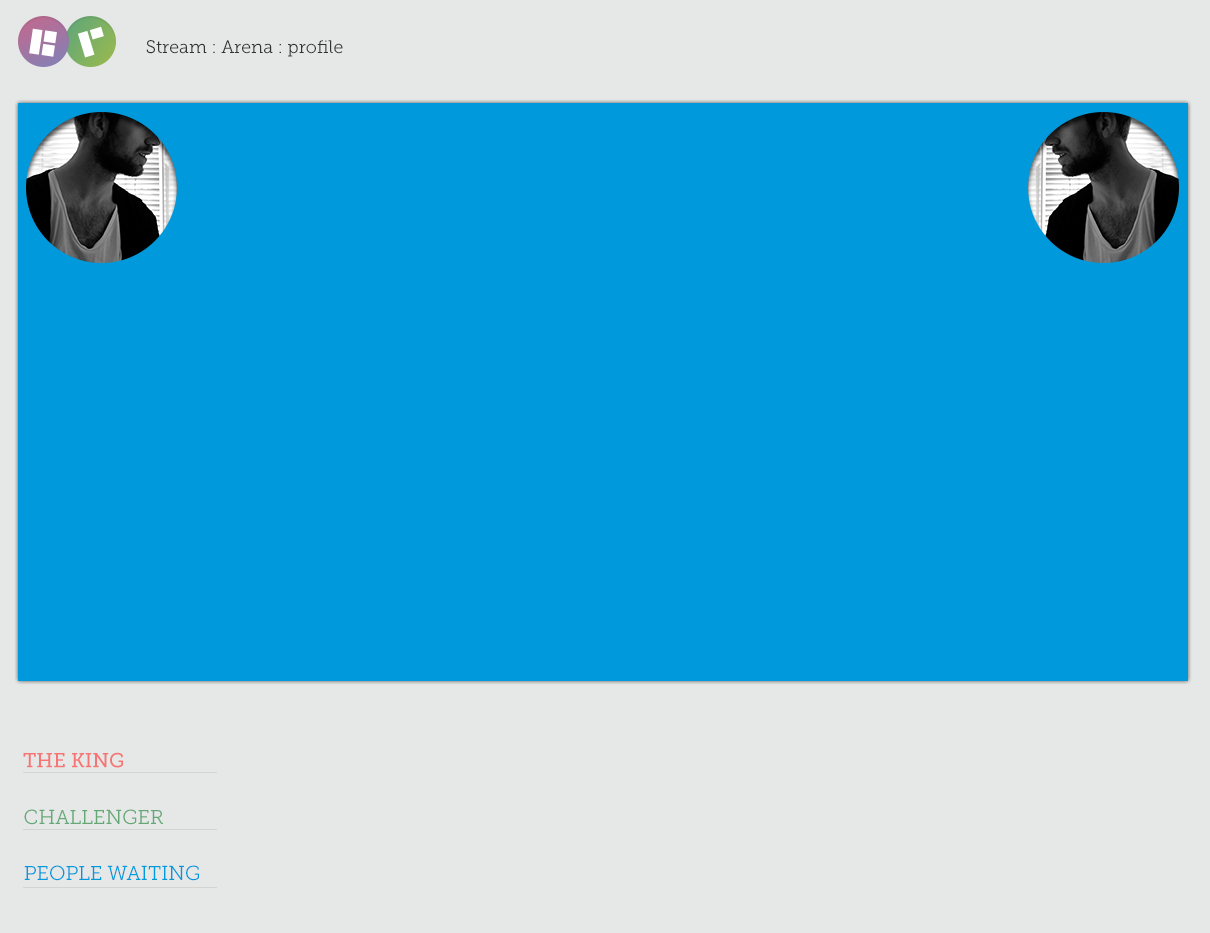
<style>
.page{position:relative;width:1210px;height:933px;background:#0099dc}
.page>*{position:absolute;margin:0}
.t1{font:18px "MuseoSlab-300";color:#333333}
.t2{font:20px "MuseoSlab-500";color:#f67574}
.t3{font:20px "MuseoSlab-300";color:#64a876}
.t4{font:20px "MuseoSlab-300";color:#0099dc}
</style>
<div class="page">
<p class="t1" style="left:146px;top:40px;width:197px;height:17px">Stream : Arena : profile</p>
<p class="t2" style="left:23px;top:752px;width:100px;height:16px">THE KING</p>
<p class="t3" style="left:24px;top:809px;width:139px;height:16px">CHALLENGER</p>
<p class="t4" style="left:24px;top:865px;width:175px;height:16px">PEOPLE WAITING</p>
</div>
